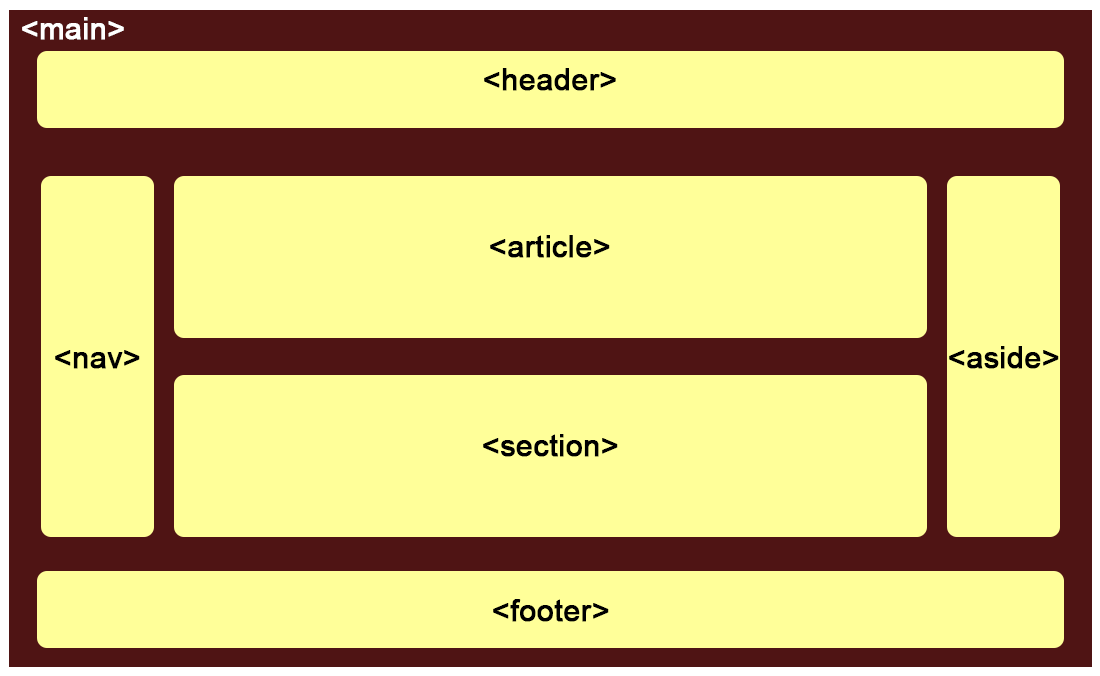
<style>
.page{position:relative;width:1100px;height:676px;background:#ffff99}
.page>*{position:absolute;margin:0}
.t1{font:30px "ArialMT";color:#ffffff;font-weight:bold}
.t2{font:30px "ArialMT";color:#000000;font-weight:bold}
</style>
<div class="page">
<p class="t1" style="left:22px;top:17px;width:102px;height:23px">&lt;main&gt;</p>
<p class="t2" style="left:484px;top:68px;width:132px;height:23px">&lt;header&gt;</p>
<p class="t2" style="left:490px;top:235px;width:120px;height:23px">&lt;article&gt;</p>
<p class="t2" style="left:55px;top:350px;width:85px;height:19px">&lt;nav&gt;</p>
<p class="t2" style="left:949px;top:346px;width:110px;height:23px">&lt;aside&gt;</p>
<p class="t2" style="left:483px;top:434px;width:135px;height:23px">&lt;section&gt;</p>
<p class="t2" style="left:493px;top:599px;width:116px;height:23px">&lt;footer&gt;</p>
</div>
